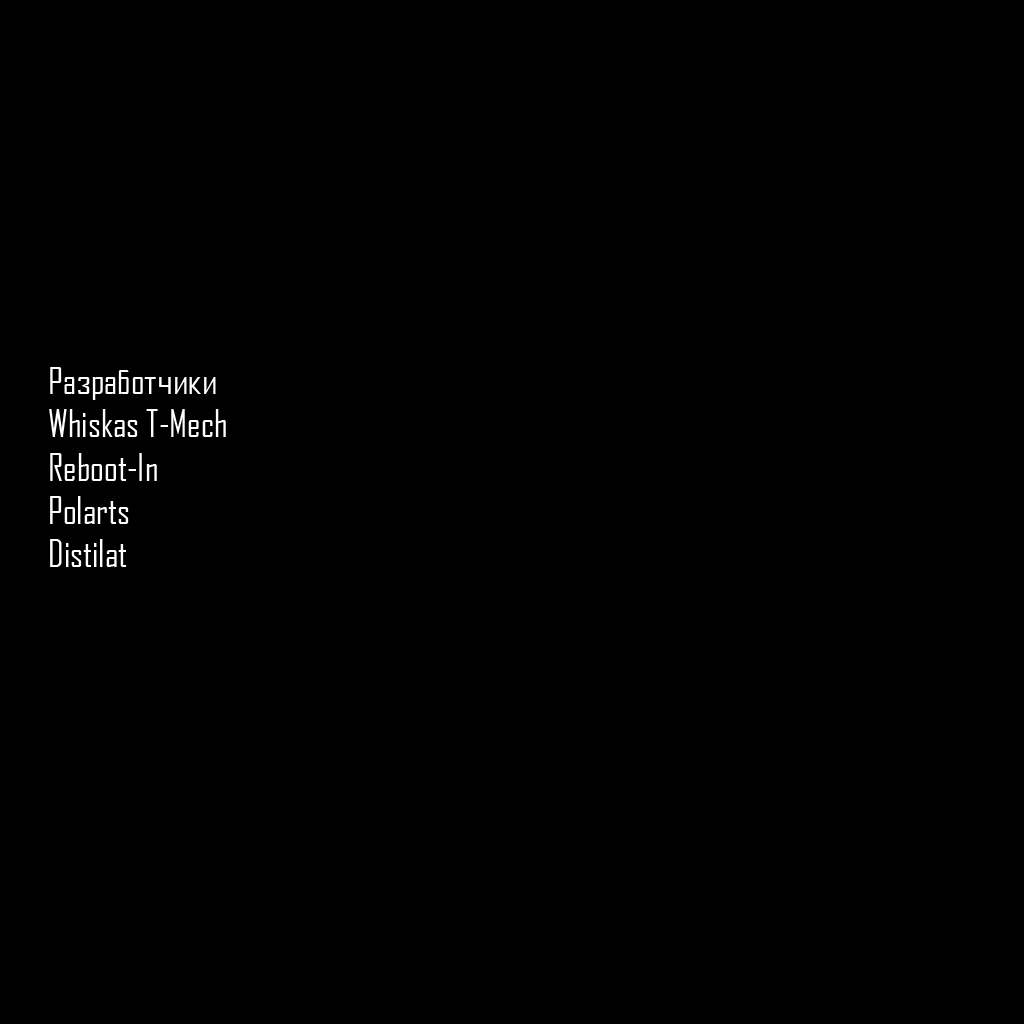
<style>
.page{position:relative;width:1024px;height:1024px;background:#000000}
.page>*{position:absolute;margin:0}
.t1{font:36px "AgencyFBCyrillic";color:#ffffff}
</style>
<div class="page">
<p class="t1" style="left:49px;top:367px;width:177px;height:200px">Разработчики<br>Whiskas T-Mech<br>Reboot-In<br>Polarts<br>Distilat</p>
</div>
